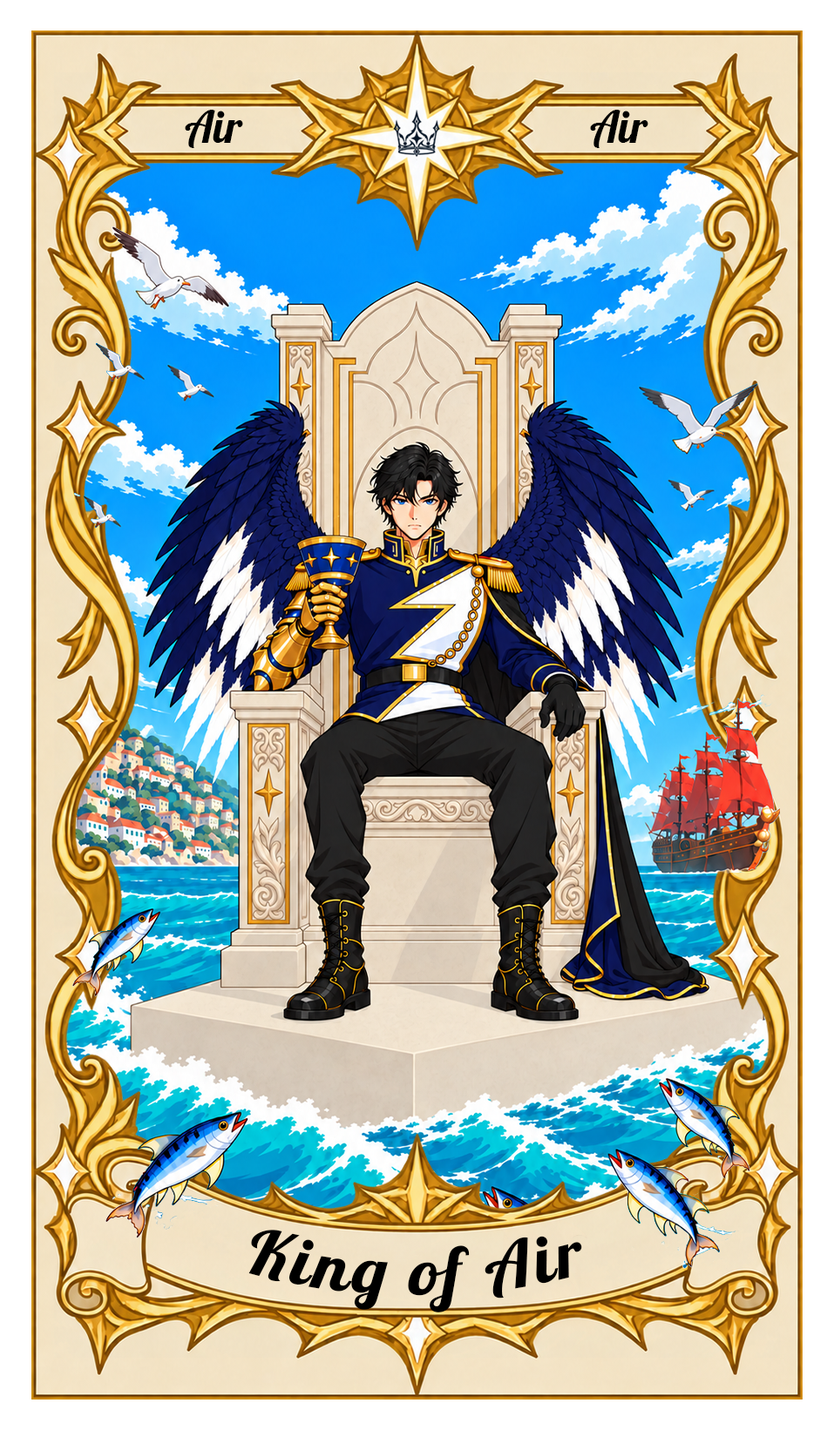
<style>
.page{position:relative;width:834px;height:1430px}
.page>*{position:absolute;margin:0}
.t1{font:43.6px "Lobster-Regular";color:#000000}
.t2{font:65.3px "Lobster-Regular";letter-spacing:0.05em;color:#000000}
</style>
<div class="page">
<p class="t1" style="left:185px;top:110px;width:58px;height:38px">Air</p>
<p class="t1" style="left:590px;top:110px;width:58px;height:38px">Air</p>
<p class="t2" style="left:248px;top:1230px;width:334px;height:83px">King of Air</p>
</div>
